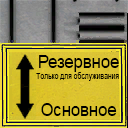
<style>
.page{position:relative;width:128px;height:128px}
.page>*{position:absolute;margin:0}
.t1{font:18px "ArialMT";color:#000000;scale:0.92 1}
.t2{font:9px "ArialNarrow";color:#000000;scale:0.92 1}
</style>
<div class="page">
<p class="t1" style="left:39px;top:55px;width:80px;height:17px">Резервное</p>
<p class="t2" style="left:36px;top:72px;width:83px;height:9px">Только для обслуживания</p>
<p class="t1" style="left:41px;top:103px;width:76px;height:13px">Основное</p>
</div>
